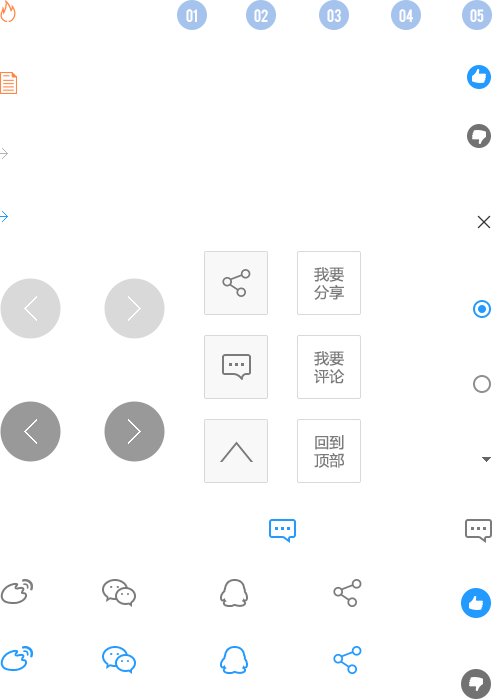
<style>
.page{position:relative;width:492px;height:700px;background:#ffffff}
.page>*{position:absolute;margin:0}
.t1{font:14px "Bebas";color:#fffefe}
.t2{font:15px "MicrosoftYaHei";color:#7a7a7a}
</style>
<div class="page">
<p class="t1" style="left:186px;top:9px;width:11px;height:13px">01</p>
<p class="t1" style="left:254px;top:9px;width:14px;height:13px">02</p>
<p class="t1" style="left:327px;top:9px;width:14px;height:13px">03</p>
<p class="t1" style="left:399px;top:9px;width:14px;height:13px">04</p>
<p class="t1" style="left:470px;top:9px;width:14px;height:13px">05</p>
<p class="t2" style="left:314px;top:267px;width:30px;height:33px">我要<br>分享</p>
<p class="t2" style="left:314px;top:351px;width:31px;height:33px">我要<br>评论</p>
<p class="t2" style="left:314px;top:435px;width:30px;height:33px">回到<br>顶部</p>
</div>
